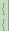
<style>
.page{position:relative;width:9px;height:31px;background:#c1dfba}
.page>*{position:absolute;margin:0}
.t1{font:12px "MaturaMTScriptCapitals";letter-spacing:-0.025em;color:#999999}
</style>
<div class="page">
<p class="t1" style="left:2px;top:3px;width:3px;height:12px">{</p>
<p class="t1" style="left:2px;top:19px;width:3px;height:12px">{</p>
</div>
